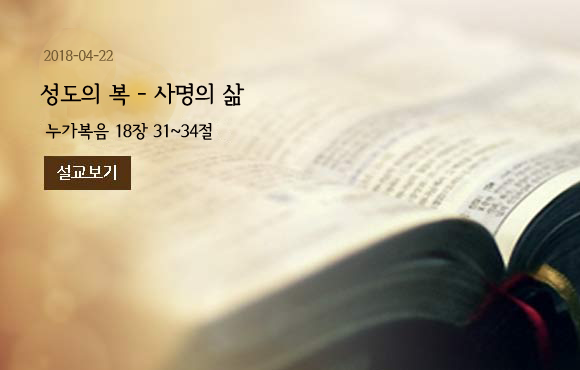
<style>
.page{position:relative;width:580px;height:370px}
.page>*{position:absolute;margin:0}
.t1{font:15px "SeoulHangangB";letter-spacing:-0.02em;color:#735a32}
.t2{font:24px "SeoulHangangB";letter-spacing:-0.02em;color:#050000}
.t3{font:18px "SeoulHangangB";letter-spacing:-0.02em;color:#050000}
</style>
<div class="page">
<p class="t1" style="left:44px;top:50px;width:69px;height:11px">2018-04-22</p>
<p class="t2" style="left:40px;top:83px;width:205px;height:23px">성도의 복 - 사명의 삶</p>
<p class="t3" style="left:45px;top:123px;width:167px;height:17px">누가복음 18장 31~34절</p>
</div>
